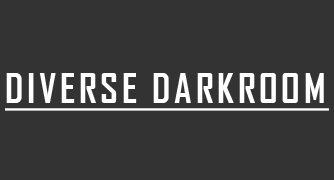
<style>
.page{position:relative;width:334px;height:180px;background:#333333}
.page>*{position:absolute;margin:0}
.t1{font:38.9px "AgencyFB-Bold";letter-spacing:0.09em;color:#ffffff;text-decoration:underline}
</style>
<div class="page">
<p class="t1" style="left:5px;top:73px;width:324px;height:38px">DIVERSE DARKROOM</p>
</div>
